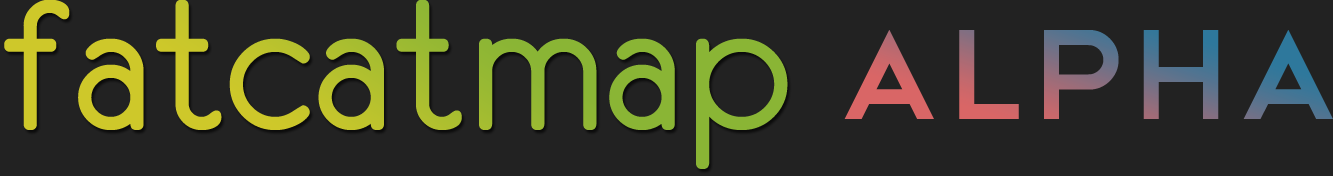
<style>
.page{position:relative;width:1333px;height:176px;background:#222222}
.page>*{position:absolute;margin:0}
.t1{font:208.3px "Eurofurenceregular"}
.t2{font:166.7px "Telegrafico"}
</style>
<div class="page">
<p class="t1" style="left:4px;top:0px;width:784px;height:169px">fatcatmap</p>
<p class="t2" style="left:844px;top:30px;width:489px;height:89px">ALPHA</p>
</div>
